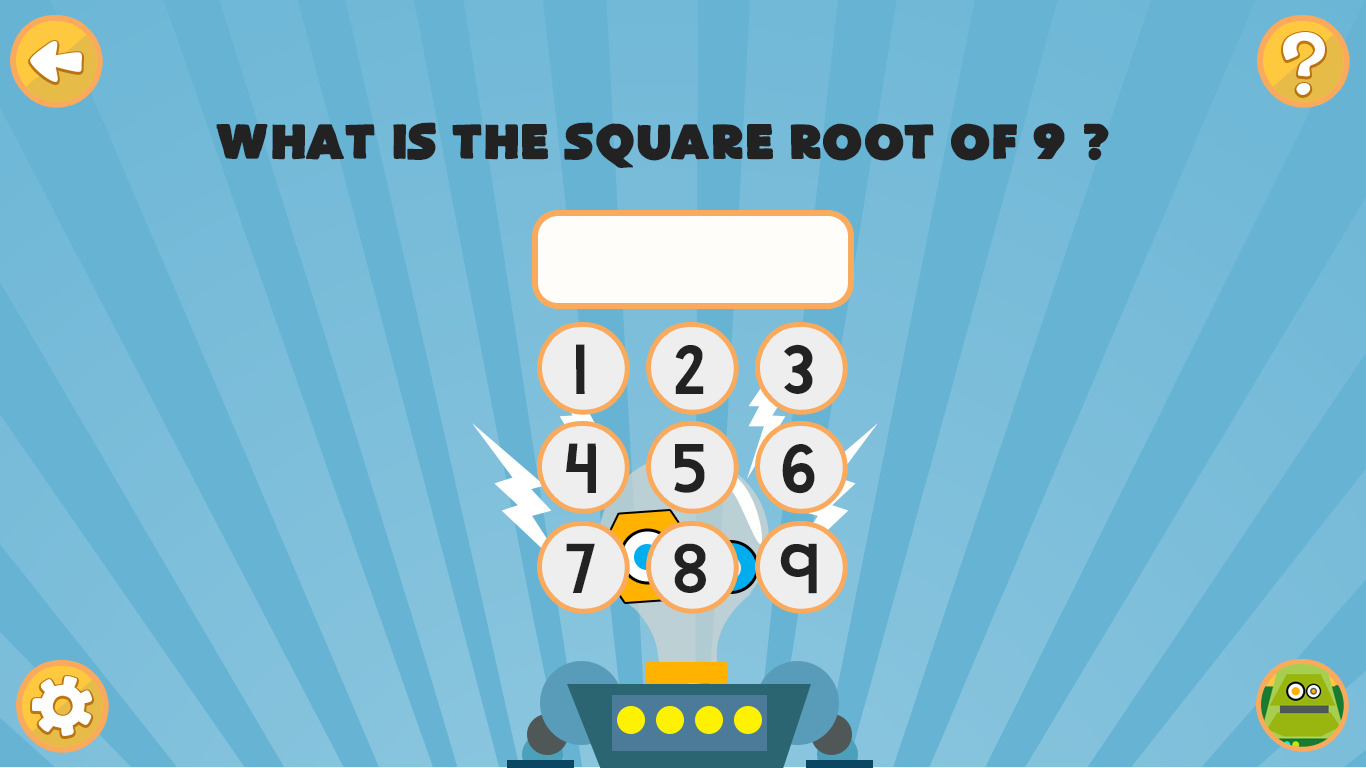
<style>
.page{position:relative;width:1366px;height:768px;background:#66b3d4}
.page>*{position:absolute;margin:0}
.t1{font:48px "FlatBread";color:#222222}
.t2{font:72px "KGWhattheTeacherWants";color:#222222}
</style>
<div class="page">
<p class="t1" style="left:216px;top:122px;width:893px;height:46px">What is the square root of 9 ?</p>
<p class="t2" style="left:576px;top:344px;width:9px;height:50px">1</p>
<p class="t2" style="left:675px;top:345px;width:29px;height:49px">2</p>
<p class="t2" style="left:784px;top:344px;width:29px;height:50px">3</p>
<p class="t2" style="left:566px;top:443px;width:30px;height:50px">4</p>
<p class="t2" style="left:674px;top:444px;width:31px;height:49px">5</p>
<p class="t2" style="left:782px;top:444px;width:33px;height:50px">6</p>
<p class="t2" style="left:566px;top:543px;width:29px;height:50px">7</p>
<p class="t2" style="left:674px;top:543px;width:32px;height:50px">8</p>
<p class="t2" style="left:780px;top:543px;width:37px;height:51px">9</p>
</div>
